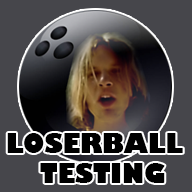
<style>
.page{position:relative;width:192px;height:192px;background:#46464b}
.page>*{position:absolute;margin:0}
.t1{font:27px/30.6px "GillSans-UltraBold";color:#000000;scale:0.91 1}
</style>
<div class="page">
<p class="t1" style="left:7px;top:133px;width:176px;height:50px;text-align:center">LOSERBALL  <br>TESTING</p>
</div>
